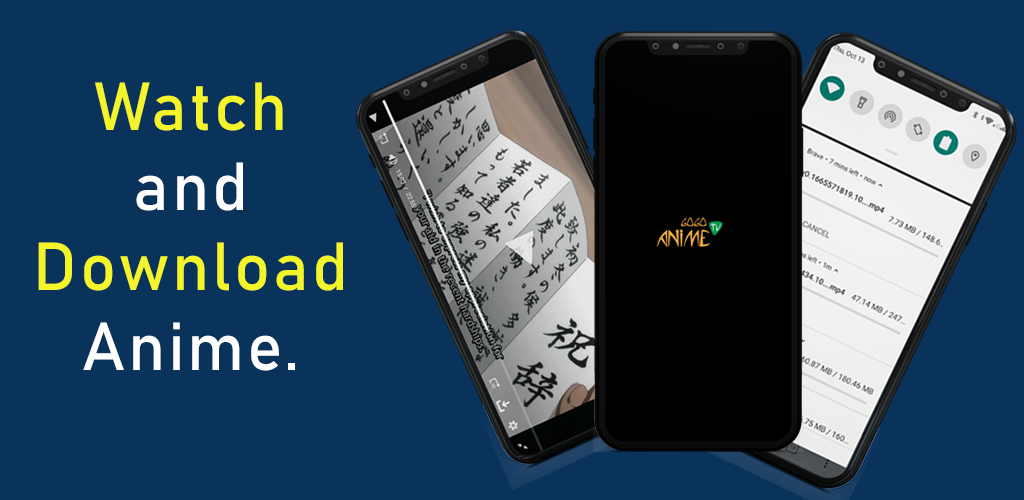
<style>
.page{position:relative;width:1024px;height:500px;background:#0a335c}
.page>*{position:absolute;margin:0}
.t1{font:66.7px "Bahnschrift";letter-spacing:0.042em;color:#f3f52a}
.t2{font:66.7px "Bahnschrift";letter-spacing:0.042em;color:#ffffff}
</style>
<div class="page">
<p class="t1" style="left:38px;top:82px;width:305px;height:289px;text-align:center">Watch <br><span class="t2">and </span>Download <span class="t2">Anime.</span></p>
</div>
